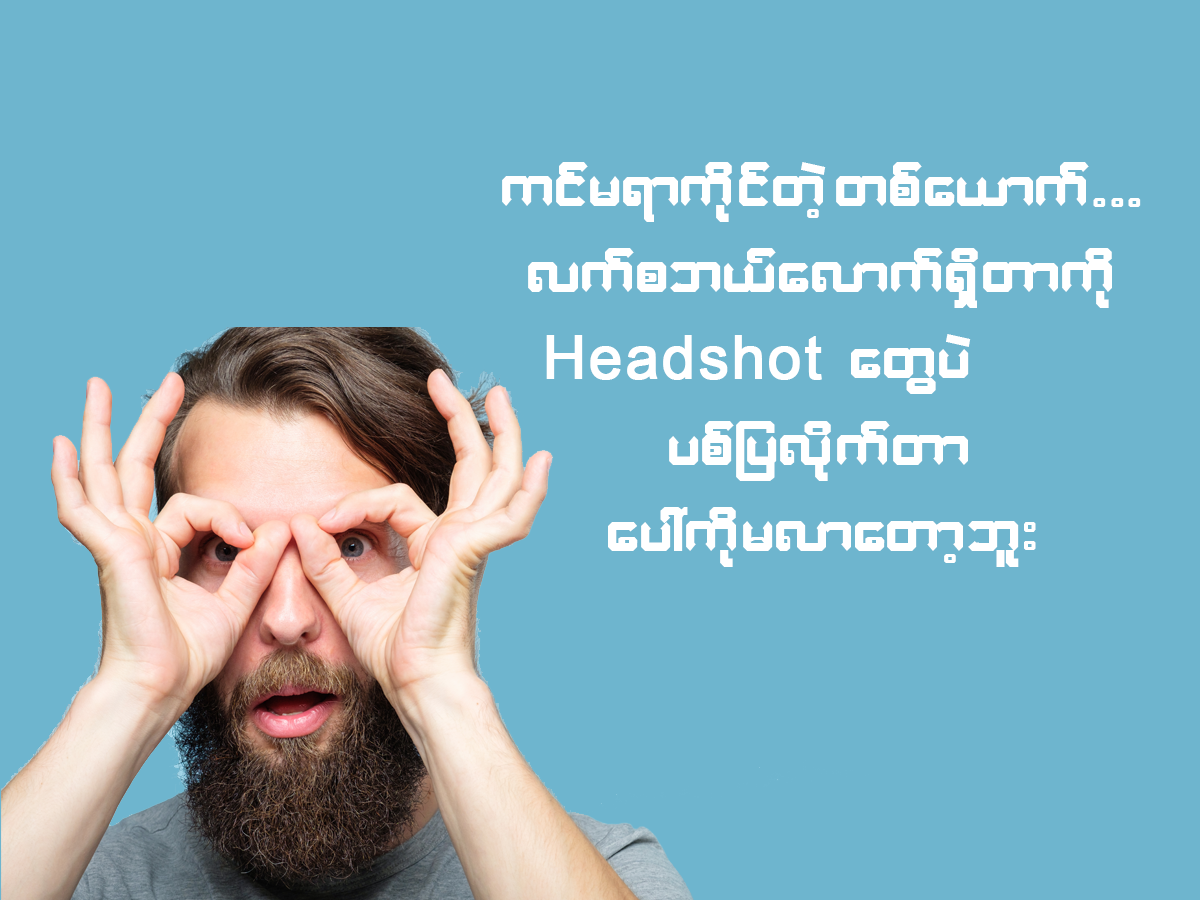
<style>
.page{position:relative;width:1200px;height:900px;background:#6eb5ce}
.page>*{position:absolute;margin:0}
.t1{font:72px "W08ArtHouseWin";letter-spacing:0.025em;color:#ffffff}
.t2{font:60px "ArialMT";letter-spacing:0.025em;color:#ffffff;font-weight:bold}
</style>
<div class="page">
<p class="t1" style="left:502px;top:162px;width:639px;height:405px;text-align:center">uifr&amp;mudkifwJh wpfa,muf...<br>vufpb,favmuf&amp;Sdwmudk<br>                              awGyJ <br>ypfjyvdkufwm <br>ay:udkrvmawmhbl;</p>
<p class="t2" style="left:546px;top:335px;width:276px;height:45px">Headshot</p>
</div>
